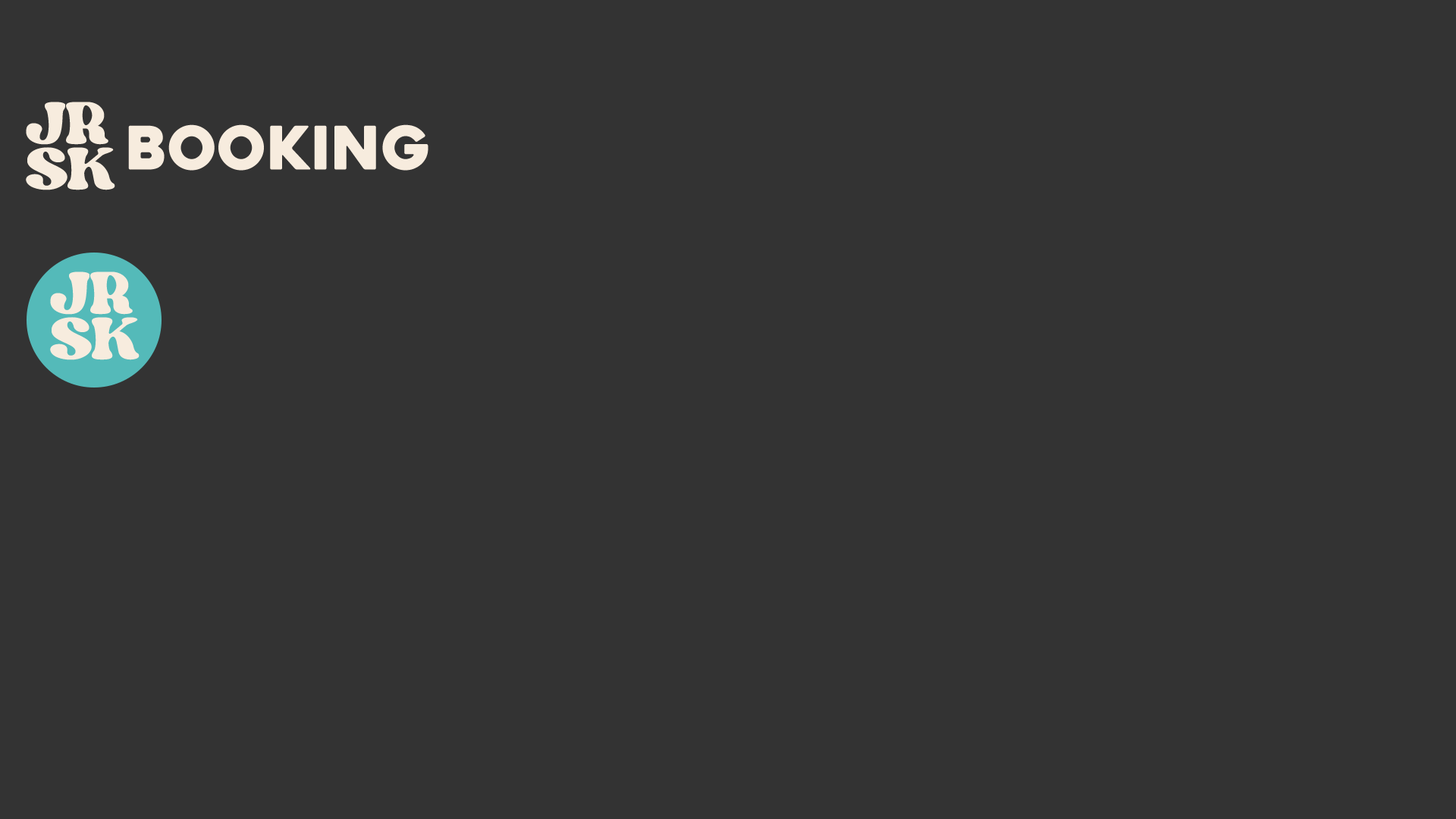
<style>
.page{position:relative;width:1456px;height:819px;background:#333333}
.page>*{position:absolute;margin:0}
.t1{font:84.2px/45.5px "Margin-DEMO";color:#f7ecde}
.t2{font:59.9px "Heavitas";color:#f7ecde}
</style>
<div class="page">
<p class="t1" style="left:26px;top:102px;width:89px;height:88px">JR<br>SK</p>
<p class="t2" style="left:128px;top:124px;width:300px;height:47px">BOOKING</p>
</div>
